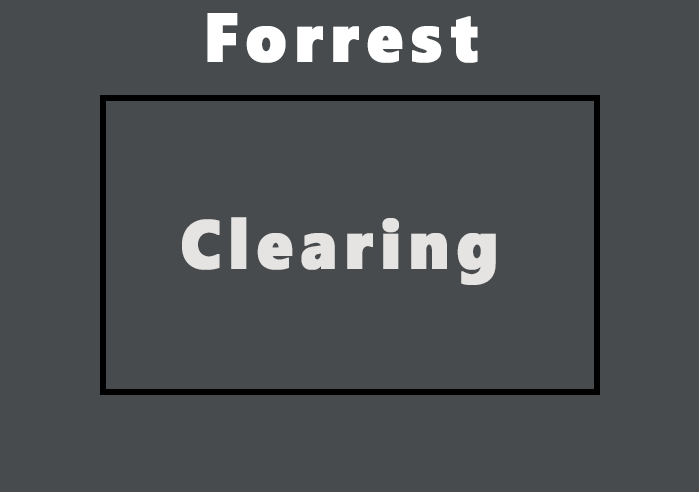
<style>
.page{position:relative;width:699px;height:492px;background:#484b4e}
.page>*{position:absolute;margin:0}
.t1{font:68.5px "SegoeWP-Black";letter-spacing:0.1em;color:#ffffff;font-weight:bold;scale:0.93 1}
.t2{font:68.5px "SegoeWP-Black";letter-spacing:0.1em;color:#e5e4e2;font-weight:bold;scale:0.93 1}
</style>
<div class="page">
<p class="t1" style="left:207px;top:13px;width:271px;height:50px">Forrest</p>
<p class="t2" style="left:182px;top:217px;width:314px;height:68px">Clearing</p>
</div>
